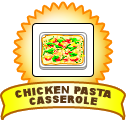
<style>
.page{position:relative;width:126px;height:120px;background:#ffffff}
.page>*{position:absolute;margin:0}
.t1{font:9.4px/9.4px "Arial-Black";letter-spacing:0.045em;color:#5b3714;text-transform:uppercase}
</style>
<div class="page">
<p class="t1" style="left:15px;top:86px;width:96px;height:20px;text-align:center">chicken pasta<br>casserole</p>
</div>
